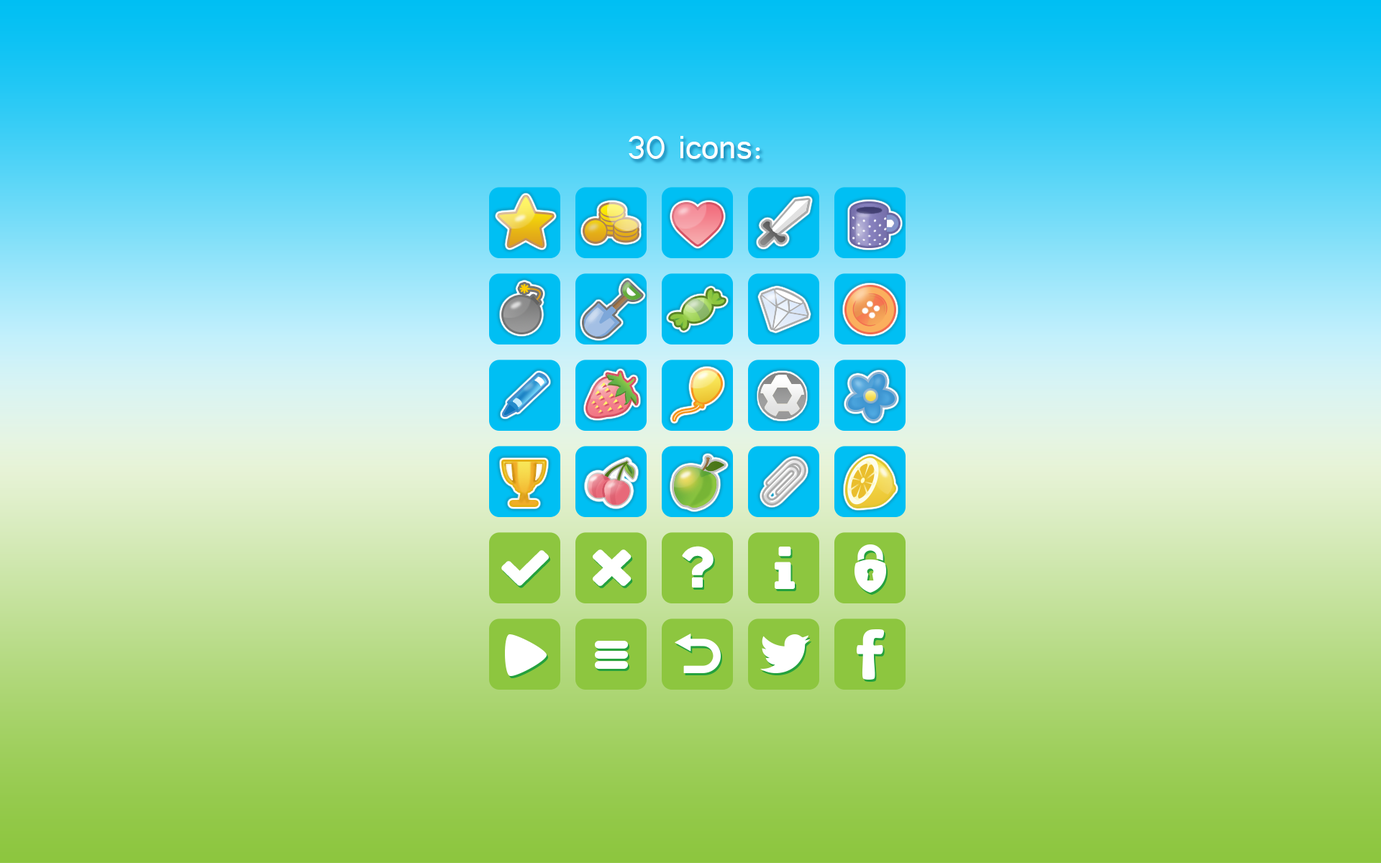
<style>
.page{position:relative;width:1381px;height:863px}
.page>*{position:absolute;margin:0}
.t1{font:40.3px "Tunga";color:#ffffff}
</style>
<div class="page">
<p class="t1" style="left:629px;top:136px;width:131px;height:23px">30 icons:</p>
</div>
